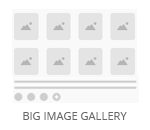
<style>
.page{position:relative;width:150px;height:130px;background:#ffffff}
.page>*{position:absolute;margin:0}
.t1{font:11px "OpenSans";color:#686868;text-transform:uppercase}
</style>
<div class="page">
<p class="t1" style="left:23px;top:112px;width:104px;height:8px">Big Image Gallery</p>
</div>
